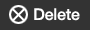
<style>
.page{position:relative;width:90px;height:30px;background:#333333}
.page>*{position:absolute;margin:0}
.t1{font:16px "HelveticaNeue-Medium";letter-spacing:-0.01em;color:#ffffff}
</style>
<div class="page">
<p class="t1" style="left:34px;top:8px;width:46px;height:13px">Delete</p>
</div>
